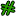
<style>
.page{position:relative;width:16px;height:16px;background:#ffffff}
.page>*{position:absolute;margin:0}
.t1{font:16px "CalifornianFB-Bold";color:#2aa000;font-weight:bold;scale:1.37 1}
</style>
<div class="page">
<p class="t1" style="left:1px;top:1px;width:14px;height:14px">#</p>
</div>
